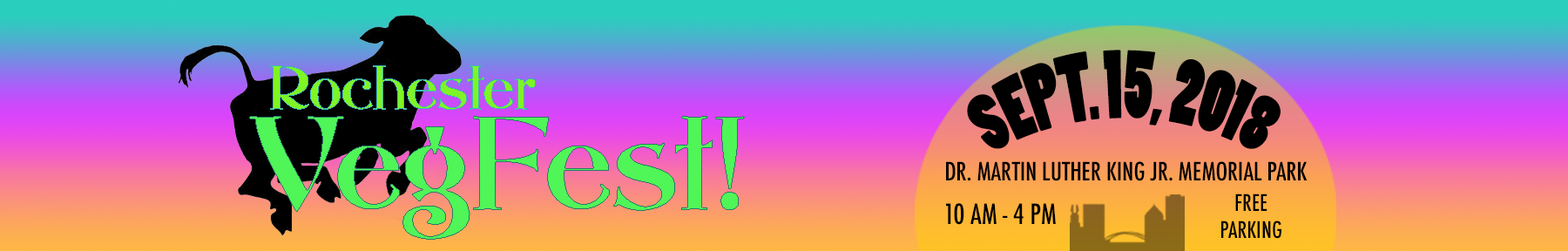
<style>
.page{position:relative;width:1568px;height:251px}
.page>*{position:absolute;margin:0}
.t1{font:54.8px "PoplarStd";color:#000000}
.t2{font:24.7px "Futura-CondensedMedium";color:#000000}
.t3{font:22.2px "Futura-CondensedMedium";color:#000000}
.t4{font:27.1px "Futura-CondensedMedium";color:#000000}
</style>
<div class="page">
<p class="t1" style="left:967px;top:50px;width:314px;height:99px;text-align:center">SEPT. 15, 2018</p>
<p class="t2" style="left:946px;top:161px;width:362px;height:20px">DR. MARTIN LUTHER KING JR. MEMORIAL PARK</p>
<p class="t3" style="left:1221px;top:193px;width:60px;height:46px;text-align:center">FREE  <br>PARKING</p>
<p class="t4" style="left:946px;top:203px;width:110px;height:22px">10 AM - 4 PM</p>
</div>
